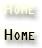
<style>
.page{position:relative;width:42px;height:48px;background:#ffffff}
.page>*{position:absolute;margin:0}
.t1{font:17px "OCRAExtended";color:#ffffff;font-variant:small-caps}
.t2{font:17px "OCRAExtended";color:#000000;font-variant:small-caps}
</style>
<div class="page">
<p class="t1" style="left:4px;top:3px;width:30px;height:11px">Home</p>
<p class="t2" style="left:4px;top:29px;width:31px;height:11px">Home</p>
</div>
